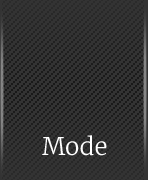
<style>
.page{position:relative;width:148px;height:180px;background:#333333}
.page>*{position:absolute;margin:0}
.t1{font:24px "Merriweather-Light";color:#ffffff}
</style>
<div class="page">
<p class="t1" style="left:42px;top:135px;width:65px;height:21px">Mode</p>
</div>
